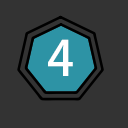
<style>
.page{position:relative;width:128px;height:128px;background:#333333}
.page>*{position:absolute;margin:0}
.t1{font:48px "AdobeHeitiStd-Regular";color:#ffffff}
</style>
<div class="page">
<p class="t1" style="left:48px;top:39px;width:25px;height:37px">4</p>
</div>
